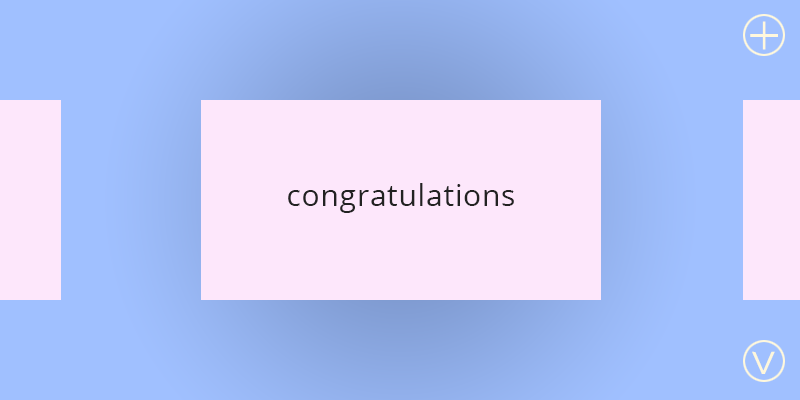
<style>
.page{position:relative;width:800px;height:400px;background:#fde7fb}
.page>*{position:absolute;margin:0}
.t1{font:60px "OpenSans-Light";letter-spacing:0.025em;color:#fef7dc}
.t2{font:30px "OpenSans";letter-spacing:0.025em;color:#222222}
.t3{font:48px "MyriadPro-Regular";letter-spacing:0.025em;color:#fef7dc}
</style>
<div class="page">
<p class="t1" style="left:750px;top:21px;width:28px;height:29px">+</p>
<p class="t2" style="left:288px;top:183px;width:226px;height:30px">congratulations</p>
<p class="t3" style="left:752px;top:351px;width:23px;height:23px;rotate:180deg">^</p>
</div>
